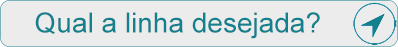
<style>
.page{position:relative;width:398px;height:47px;background:#ececec}
.page>*{position:absolute;margin:0}
.t1{font:28px "ArialMT";color:#13818d}
</style>
<div class="page">
<p class="t1" style="left:35px;top:12px;width:285px;height:27px">Qual a linha desejada?</p>
</div>
